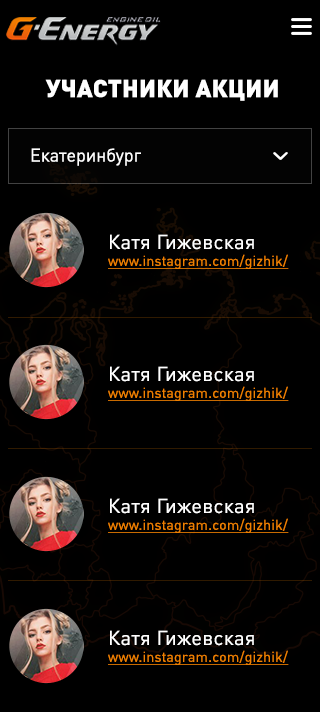
<style>
.page{position:relative;width:320px;height:712px;background:#000000}
.page>*{position:absolute;margin:0}
.t1{font:24px "DINPro-Black";letter-spacing:0.02em;color:#ffffff;text-transform:uppercase}
.t2{font:18px "DINPro-Regular";color:#ffffff}
.t3{font:14px "DINPro-Regular";letter-spacing:0.02em;color:#f08100;text-decoration:underline}
.t4{font:20px "DINPro-Regular";letter-spacing:0.02em;color:#ffffff}
</style>
<div class="page">
<p class="t1" style="left:45px;top:79px;width:233px;height:22px">УЧАСТНИКИ АКЦИИ</p>
<p class="t2" style="left:31px;top:148px;width:110px;height:18px">Екатеринбург</p>
<p class="t3" style="left:108px;top:234px;width:181px;height:35px"><span class="t4">Катя Гижевская<br></span>www.instagram.com/gizhik/</p>
<p class="t3" style="left:108px;top:366px;width:181px;height:35px"><span class="t4">Катя Гижевская<br></span>www.instagram.com/gizhik/</p>
<p class="t3" style="left:108px;top:498px;width:181px;height:35px"><span class="t4">Катя Гижевская<br></span>www.instagram.com/gizhik/</p>
<p class="t3" style="left:108px;top:630px;width:181px;height:35px"><span class="t4">Катя Гижевская<br></span>www.instagram.com/gizhik/</p>
</div>
